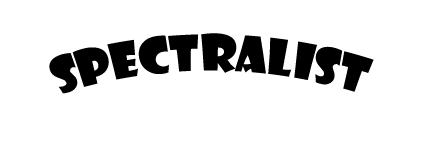
<style>
.page{position:relative;width:425px;height:142px;background:#ffffff}
.page>*{position:absolute;margin:0}
.t1{font:48px "ShowcardGothic-Reg";color:#000000}
</style>
<div class="page">
<p class="t1" style="left:49px;top:33px;width:325px;height:61px">Spectralist</p>
</div>
